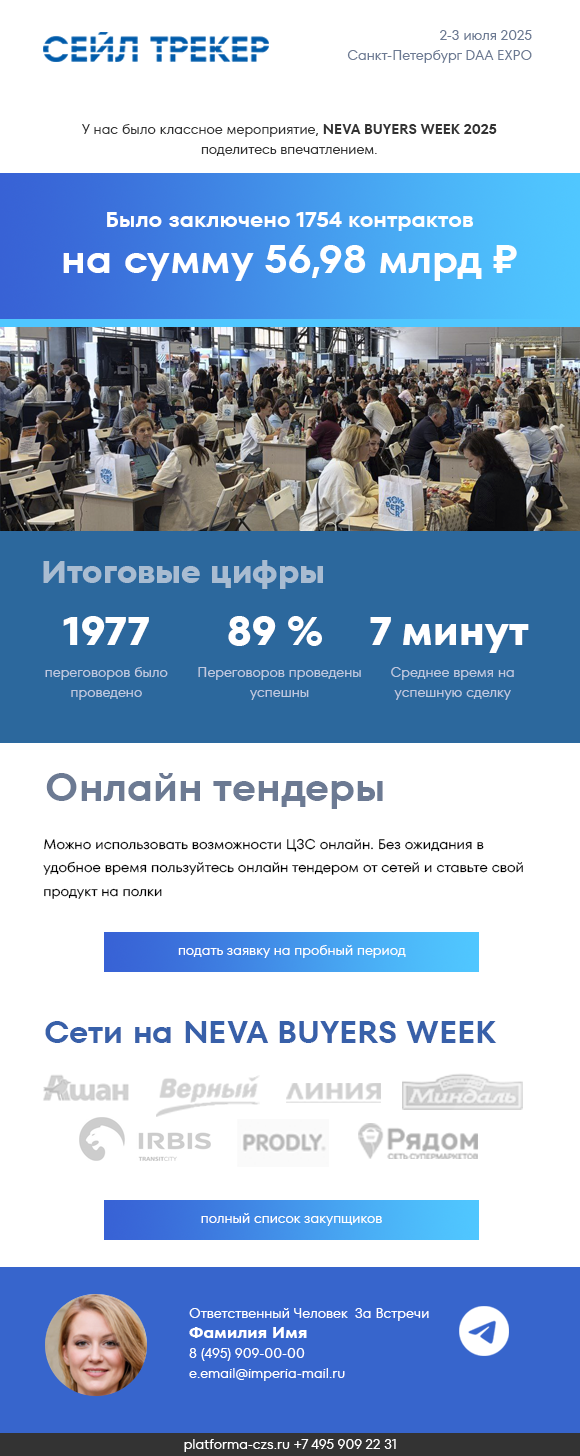
<style>
.page{position:relative;width:580px;height:1456px;background:#ffffff}
.page>*{position:absolute;margin:0}
.t1{font:14px/20px "TTFors-Regular";color:#6c7a93}
.t2{font:14px/20px "TTFors-Regular";color:#000000}
.t3{font:14px/20px "TTFors-Regular";color:#333333}
.t4{font:14px/20px "TTFors-DemiBold";color:#333333}
.t5{font:22px/46px "TTFors-DemiBold";color:#ffffff}
.t6{font:40px/46px "TTFors-DemiBold";color:#ffffff}
.t7{font:32px "TTFors-Bold";color:#a9bcd1}
.t8{font:40px "TTFors-Bold";color:#ffffff}
.t9{font:14px/20px "TTFors-Regular";color:#bec8df}
.t10{font:40px "TTFors-DemiBold";color:#6c7a93}
.t11{font:14px/23.4px "TTFors-Regular";color:#000000;scale:1.03 1}
.t12{font:14px "TTFors-Regular";color:#ffffff}
.t13{font:32px "TTFors-DemiBold";color:#3860a9}
.t14{font:14px/20px "TTFors-Regular";color:#ffffff}
.t15{font:16px/20px "TTFors-Bold";color:#ffffff}
</style>
<div class="page">
<p class="t1" style="left:347px;top:30px;width:185px;height:33px;text-align:right">2-3 июля 2025<br>Санкт-Петербург DAA EXPO<br><span class="t2"><br>Санкт-Петербург DAA EXPO</span></p>
<p class="t3" style="left:82px;top:124px;width:415px;height:32px;text-align:center">У нас было классное мероприятие, <span class="t4">NEVA BUYERS WEEK 2025</span>поделитесь впечатлением. <br>Собираем отзывы, напишите нам что думаете</p>
<p class="t5" style="left:63px;top:212px;width:454px;height:69px;text-align:center">Было заключено 1754 контрактов<br><span class="t6">на сумму 56,98 млрд ₽</span></p>
<p class="t7" style="left:43px;top:560px;width:280px;height:29px">Итоговые цифры</p>
<p class="t8" style="left:63px;top:616px;width:86px;height:29px">1977</p>
<p class="t8" style="left:228px;top:616px;width:94px;height:30px">89 %</p>
<p class="t8" style="left:370px;top:617px;width:159px;height:36px">7 минут</p>
<p class="t9" style="left:45px;top:667px;width:123px;height:33px;text-align:center">переговоров было проведено</p>
<p class="t9" style="left:198px;top:667px;width:163px;height:33px;text-align:center">Переговоров проведены успешны</p>
<p class="t9" style="left:391px;top:667px;width:123px;height:33px;text-align:center">Среднее время на успешную сделку</p>
<p class="t10" style="left:46px;top:773px;width:337px;height:36px">Онлайн тендеры</p>
<p class="t11" style="left:43px;top:838px;width:480px;height:61px">Можно использовать возможности ЦЗС онлайн. Без ожидания в удобное время пользуйтесь онлайн тендером от сетей и ставьте свой продукт на полки</p>
<p class="t12" style="left:178px;top:945px;width:228px;height:13px">подать заявку на пробный период</p>
<p class="t13" style="left:45px;top:1021px;width:452px;height:22px">Сети на NEVA BUYERS WEEK</p>
<p class="t12" style="left:201px;top:1213px;width:181px;height:13px">полный список закупщиков</p>
<p class="t14" style="left:189px;top:1308px;width:240px;height:73px">Ответственный Человек  За Встречи<br><span class="t15">Фамилия Имя <br></span>8 (495) 909-00-00<br>e.email@imperia-mail.ru</p>
<p class="t12" style="left:184px;top:1439px;width:212px;height:13px">platforma-czs.ru +7 495 909 22 31</p>
</div>
